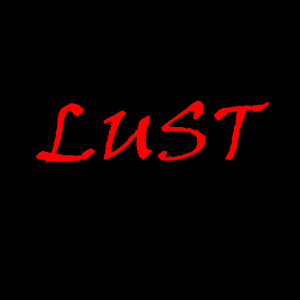
<style>
.page{position:relative;width:300px;height:300px;background:#000000}
.page>*{position:absolute;margin:0}
.t1{font:80px "VinerHandITC";color:#ff0000}
</style>
<div class="page">
<p class="t1" style="left:36px;top:100px;width:233px;height:63px">LUST</p>
</div>
